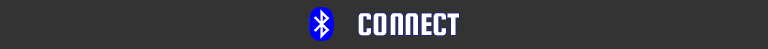
<style>
.page{position:relative;width:768px;height:49px;background:#333333}
.page>*{position:absolute;margin:0}
.t1{font:33.3px "SquadaOne-Regular";color:#ffffff}
</style>
<div class="page">
<p class="t1" style="left:358px;top:13px;width:101px;height:23px">CONNECT</p>
</div>
